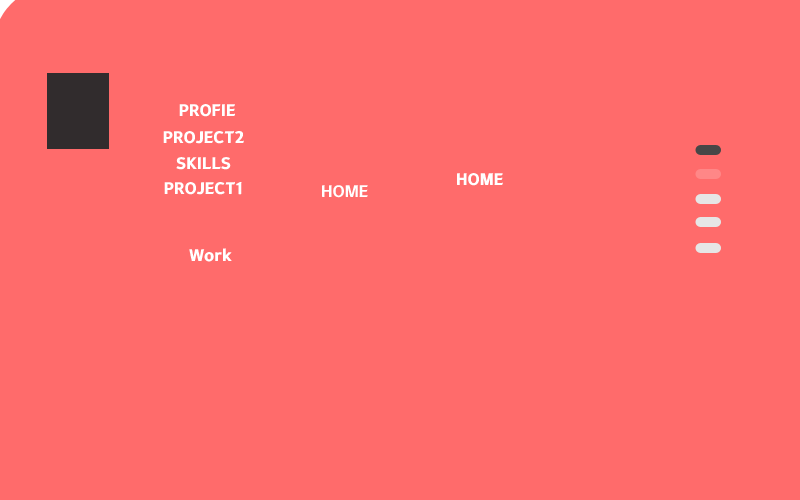
<style>
.page{position:relative;width:800px;height:500px;background:#ff6b6b}
.page>*{position:absolute;margin:0}
.t1{font:17px "TTHayanbaramB";color:#fffefe}
.t2{font:17px "TTHayanbaramB";color:#ffffff}
.t3{font:17px "TTHayanbaramR";color:#ffffff}
</style>
<div class="page">
<p class="t1" style="left:179px;top:104px;width:56px;height:13px">PROFIE</p>
<p class="t1" style="left:163px;top:130px;width:81px;height:14px">PROJECT2</p>
<p class="t2" style="left:176px;top:157px;width:55px;height:13px">SKILLS</p>
<p class="t2" style="left:457px;top:173px;width:46px;height:13px">HOME</p>
<p class="t2" style="left:164px;top:181px;width:78px;height:14px">PROJECT1</p>
<p class="t3" style="left:322px;top:185px;width:46px;height:13px">HOME</p>
<p class="t2" style="left:189px;top:248px;width:43px;height:14px">Work</p>
</div>
